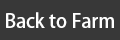
<style>
.page{position:relative;width:120px;height:40px;background:#383838}
.page>*{position:absolute;margin:0}
.t1{font:18.9px "AdobeHeitiStd-Regular";color:#ffffff}
</style>
<div class="page">
<p class="t1" style="left:6px;top:12px;width:108px;height:16px">Back to Farm</p>
</div>
